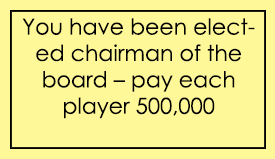
<style>
.page{position:relative;width:275px;height:159px;background:#fff899}
.page>*{position:absolute;margin:0}
.t1{font:22px "CenturyGothic";color:#000000}
</style>
<div class="page">
<p class="t1" style="left:22px;top:18px;width:233px;height:101px;text-align:center">You have been elected chairman of the board – pay each player 500,000</p>
</div>
